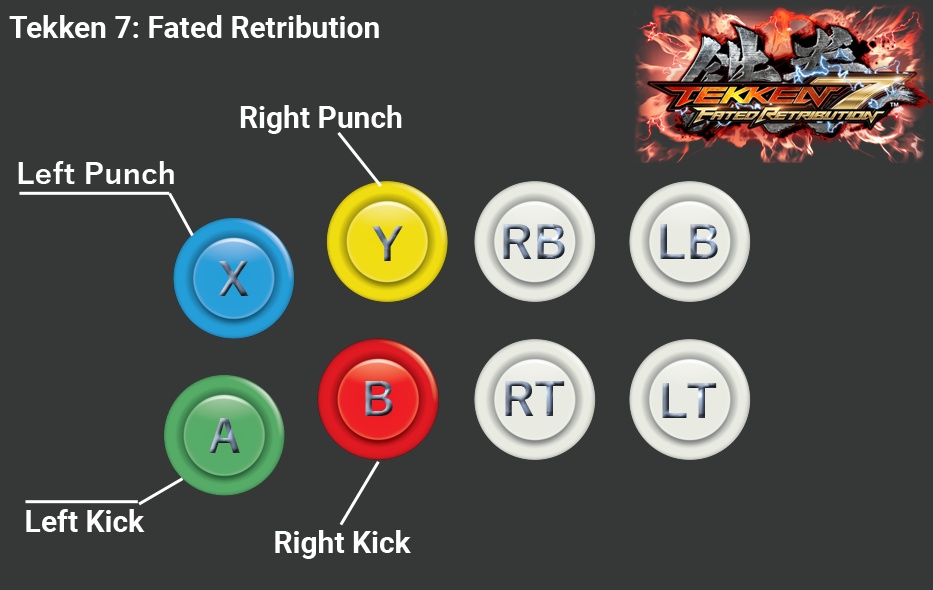
<style>
.page{position:relative;width:933px;height:590px;background:#363838}
.page>*{position:absolute;margin:0}
.t1{font:30px "Roboto-Bold";color:#ffffff}
.t2{font:30px "YuGothic-Bold";color:#ffffff}
</style>
<div class="page">
<p class="t1" style="left:9px;top:15px;width:370px;height:23px">Tekken 7: Fated Retribution</p>
<p class="t1" style="left:240px;top:105px;width:162px;height:29px">Right Punch</p>
<p class="t2" style="left:18px;top:161px;width:156px;height:23px">Left Punch</p>
<p class="t1" style="left:26px;top:509px;width:119px;height:23px">Left Kick</p>
<p class="t1" style="left:275px;top:530px;width:136px;height:29px">Right Kick</p>
</div>
